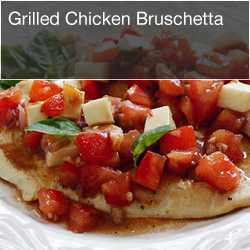
<style>
.page{position:relative;width:250px;height:250px}
.page>*{position:absolute;margin:0}
.t1{font:18px "HelveticaNeue";color:#ffffff}
</style>
<div class="page">
<p class="t1" style="left:8px;top:11px;width:216px;height:14px">Grilled Chicken Bruschetta</p>
</div>
